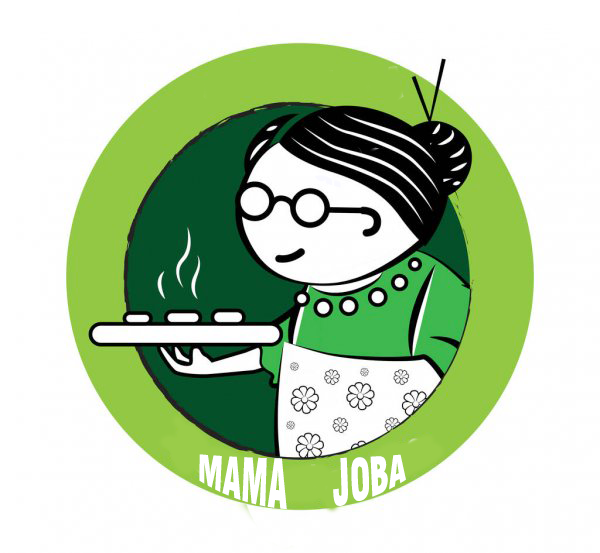
<style>
.page{position:relative;width:600px;height:553px;background:#ffffff}
.page>*{position:absolute;margin:0}
.t1{font:33.3px "Swiss721BT-BlackCondensed";color:#ffffff}
</style>
<div class="page">
<p class="t1" style="left:199px;top:454px;width:207px;height:56px">MAMA     JOBA</p>
</div>
